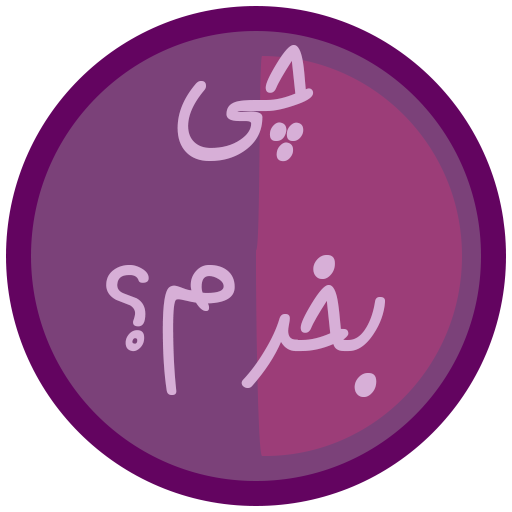
<style>
.page{position:relative;width:512px;height:512px;background:#7b4179}
.page>*{position:absolute;margin:0}
.t1{font:200px "2--KamranBold";color:#d7afd7}
</style>
<div class="page">
<p class="t1" style="left:106px;top:45px;width:279px;height:352px;text-align:center">چی بخرم؟</p>
</div>
